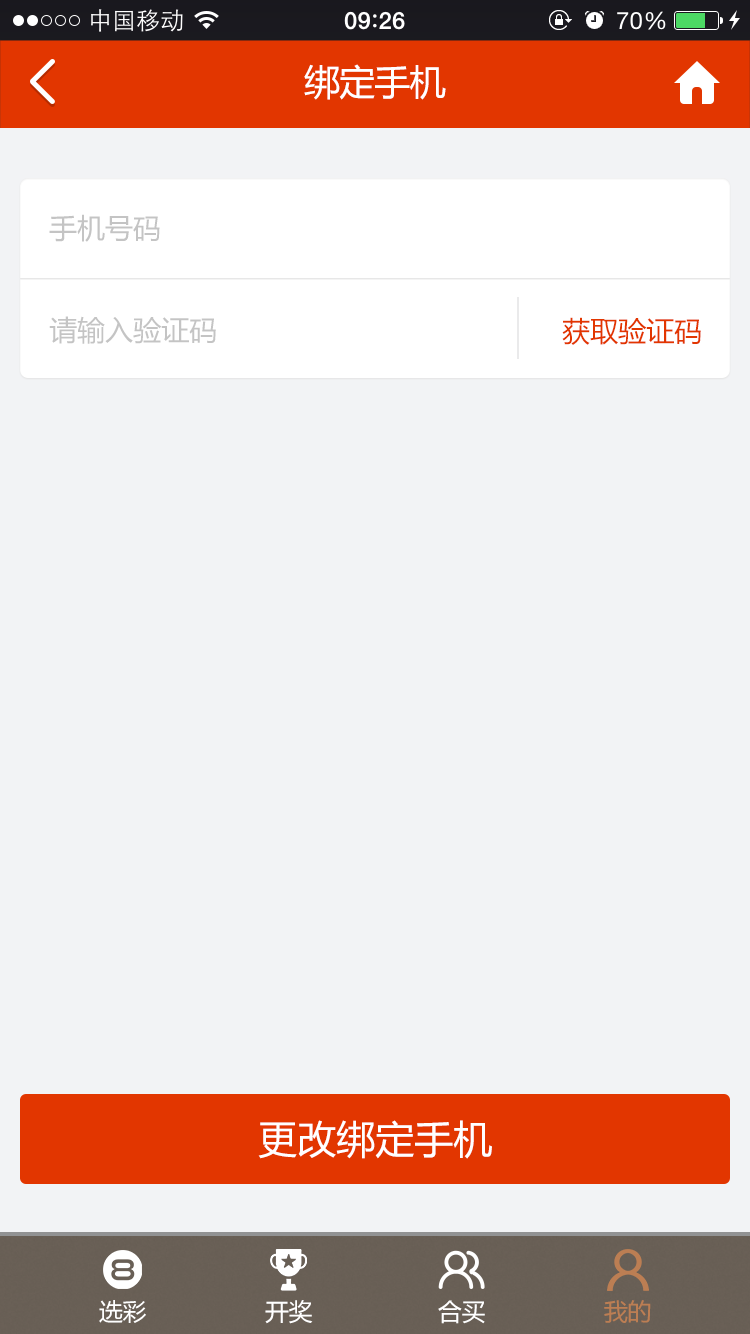
<style>
.page{position:relative;width:750px;height:1334px;background:#f2f3f5}
.page>*{position:absolute;margin:0}
.t1{font:36px "MicrosoftYaHei";letter-spacing:-0.025em;color:#ffffff}
.t2{font:28px "MicrosoftYaHei";color:#c4c4c4}
.t3{font:28px "MicrosoftYaHei";color:#e23600}
.t4{font:39px "MicrosoftYaHei";color:#ffffff}
.t5{font:24px "MicrosoftYaHei";letter-spacing:-0.025em;color:#ffffff}
.t6{font:24px "MicrosoftYaHei";letter-spacing:-0.025em;color:#bc7e53}
</style>
<div class="page">
<p class="t1" style="left:304px;top:64px;width:142px;height:36px">绑定手机</p>
<p class="t2" style="left:49px;top:214px;width:111px;height:28px">手机号码</p>
<p class="t2" style="left:49px;top:316px;width:167px;height:28px">请输入验证码</p>
<p class="t3" style="left:562px;top:317px;width:139px;height:28px">获取验证码</p>
<p class="t4" style="left:258px;top:1120px;width:234px;height:39px">更改绑定手机</p>
<p class="t5" style="left:99px;top:1300px;width:47px;height:23px">选彩</p>
<p class="t5" style="left:265px;top:1300px;width:48px;height:24px">开奖</p>
<p class="t5" style="left:438px;top:1300px;width:47px;height:24px">合买</p>
<p class="t6" style="left:604px;top:1300px;width:47px;height:23px">我的</p>
</div>
